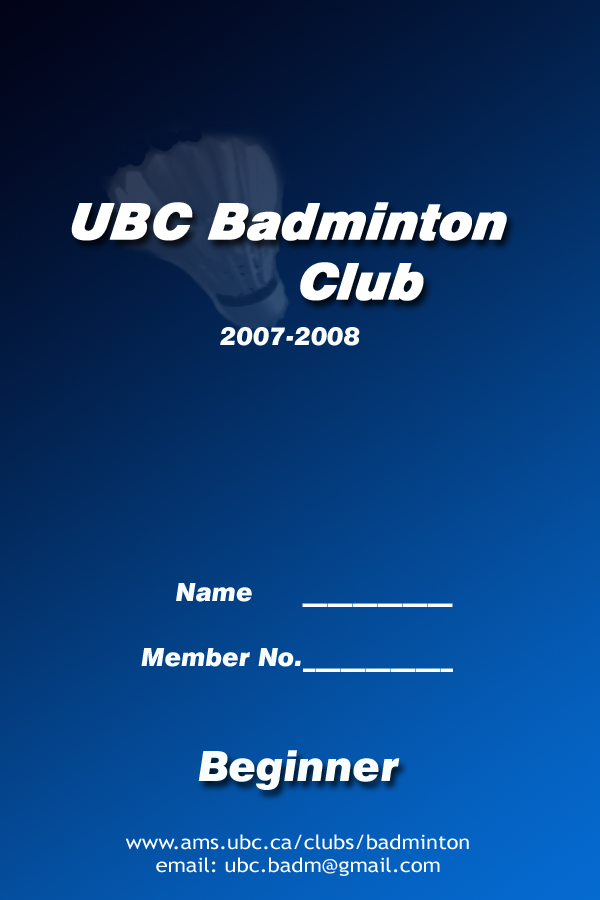
<style>
.page{position:relative;width:600px;height:900px}
.page>*{position:absolute;margin:0}
.t1{font:25px "Swiss721BT-BlackItalic";color:#f9fdfe}
.t2{font:41.7px "Swiss721BT-BlackItalic";color:#f9fdfe}
.t3{font:19.8px "TrebuchetMS";color:#f9fdfe;scale:1.1 1}
</style>
<div class="page">
<p class="t1" style="left:220px;top:327px;width:140px;height:19px">2007-2008</p>
<p class="t1" style="left:176px;top:583px;width:277px;height:24px">Name      ____________</p>
<p class="t1" style="left:141px;top:648px;width:312px;height:24px">Member No.____________</p>
<p class="t2" style="left:198px;top:750px;width:202px;height:40px">Beginner</p>
<p class="t3" style="left:125px;top:834px;width:344px;height:42px;text-align:center">www.ams.ubc.ca/clubs/badminton<br>email: ubc.badm@gmail.com</p>
</div>
